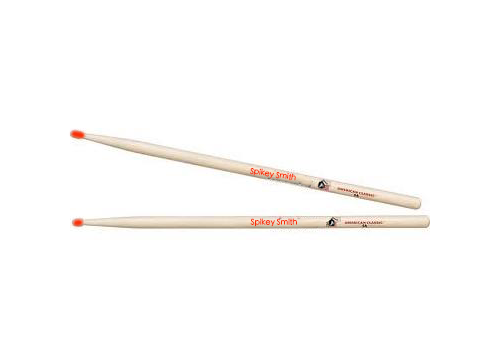
<style>
.page{position:relative;width:500px;height:360px;background:#ffffff}
.page>*{position:absolute;margin:0}
.t1{font:7.9px "STHeitiTC-Light";color:#fa2c03}
</style>
<div class="page">
<p class="t1" style="left:249px;top:168px;width:47px;height:13px;rotate:9deg">Spikey Smith</p>
<p class="t1" style="left:250px;top:218px;width:47px;height:9px;rotate:-1deg">Spikey Smith</p>
</div>
